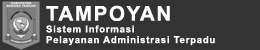
<style>
.page{position:relative;width:260px;height:50px;background:#333333}
.page>*{position:absolute;margin:0}
.t1{font:20.5px "Arial-BoldMT";letter-spacing:0.075em;color:#ffffff}
.t2{font:9.6px "Arial-BoldMT";letter-spacing:0.075em;color:#ffffff}
</style>
<div class="page">
<p class="t1" style="left:46px;top:5px;width:124px;height:16px">TAMPOYAN</p>
<p class="t2" style="left:46px;top:25px;width:88px;height:8px">Sistem Informasi</p>
<p class="t2" style="left:46px;top:36px;width:169px;height:10px">Pelayanan Administrasi Terpadu</p>
</div>
